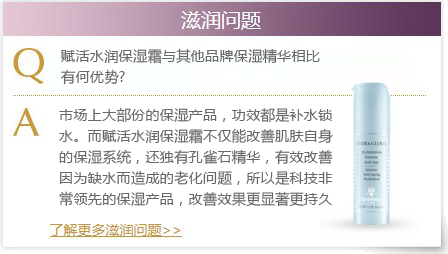
<style>
.page{position:relative;width:448px;height:254px;background:#ffffff}
.page>*{position:absolute;margin:0}
.t1{font:14.4px "MicrosoftYaHei";color:#676767}
</style>
<div class="page">
<p class="t1" style="left:61px;top:48px;width:259px;height:37px">赋活水润保湿霜与其他品牌保湿精华相比<br>有何优势?</p>
<p class="t1" style="left:59px;top:107px;width:274px;height:100px">市场上大部份的保湿产品，功效都是补水锁水。而赋活水润保湿霜不仅能改善肌肤自身的保湿系统，还独有孔雀石精华，有效改善因为缺水而造成的老化问题，所以是科技非常领先的保湿产品，改善效果更显著更持久，使用四周后，皮肤的含水量能够达到儿童的水平。</p>
</div>
